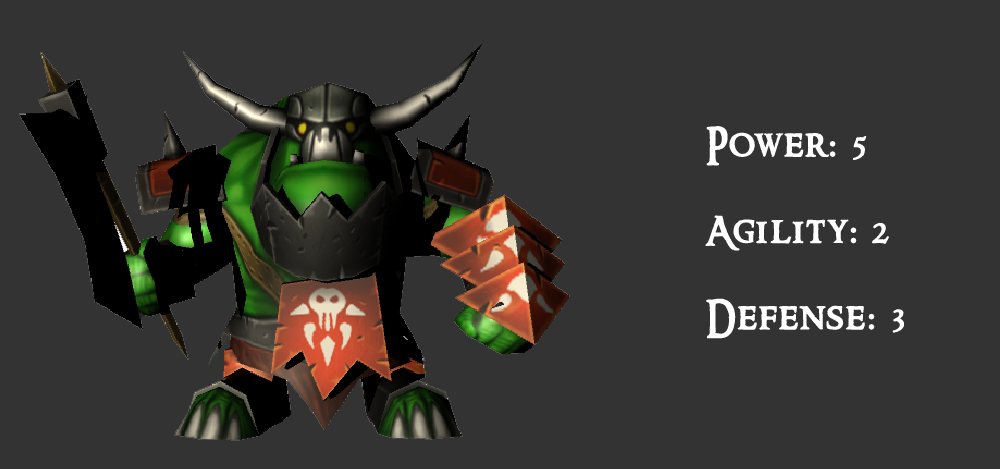
<style>
.page{position:relative;width:1000px;height:469px;background:#333333}
.page>*{position:absolute;margin:0}
.t1{font:36px "RingbearMedium";letter-spacing:0.05em;color:#ffffff;font-weight:bold}
.t2{font:36px "BodoniMT";letter-spacing:0.05em;color:#ffffff;font-weight:bold}
</style>
<div class="page">
<p class="t1" style="left:705px;top:126px;width:199px;height:213px;text-align:right">Power<span class="t2">:</span> 5<br><br>Agility<span class="t2">:</span> 2<br><br>Defense<span class="t2">:</span> 3</p>
</div>
